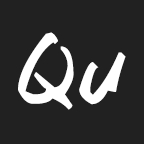
<style>
.page{position:relative;width:144px;height:144px;background:#222121}
.page>*{position:absolute;margin:0}
.t1{font:87.1px "Ò¶¸ùÓÑÌØÉ«¼òÌåÉý¼¶°æ";color:#ffffff}
</style>
<div class="page">
<p class="t1" style="left:18px;top:32px;width:108px;height:78px">Qu</p>
</div>
